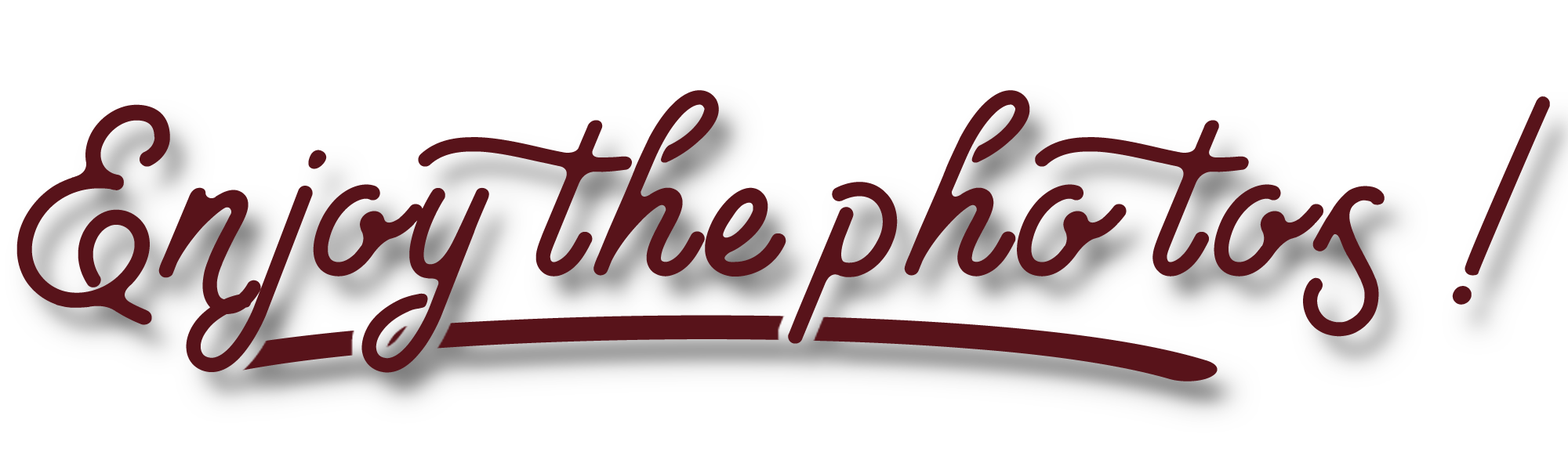
<style>
.page{position:relative;width:1568px;height:470px;background:#ffffff}
.page>*{position:absolute;margin:0}
.t1{font:321px "FS-North-Land";color:#58131a}
.t2{font:539.3px "FS-North-Land-Swash";color:#58131a;scale:2.5 1}
</style>
<div class="page">
<p class="t1" style="left:16px;top:90px;width:1534px;height:283px">Enjoy the photos !</p>
<p class="t2" style="left:187px;top:315px;width:1031px;height:67px">C</p>
</div>
